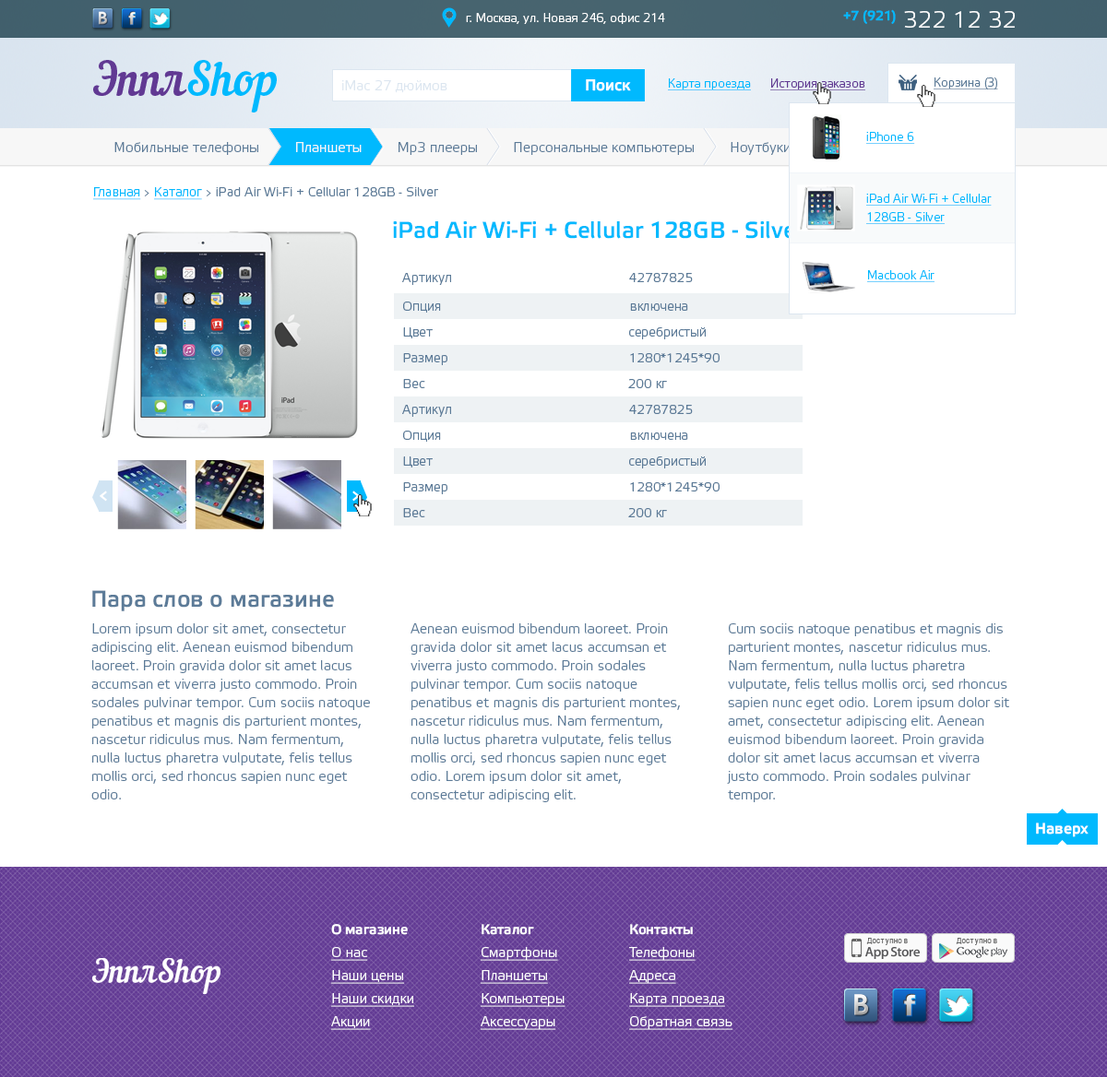
<style>
.page{position:relative;width:1107px;height:1077px;background:#ffffff}
.page>*{position:absolute;margin:0}
.t1{font:12px "ElektraLightPro";color:#ffffff}
.t2{font:23.1px "ElektraLightPro";color:#ffffff}
.t3{font:23.1px "ElektraLightPro-Bold";color:#00b9fe}
.t4{font:12px "ElektraLightPro";color:#5c7b98;text-decoration:underline}
.t5{font:13.8px "ElektraLightPro";color:#dce6f0}
.t6{font:15.7px "ElektraLightPro-Bold";color:#ffffff}
.t7{font:12px "ElektraLightPro";color:#00b9fe;text-decoration:underline}
.t8{font:12px "ElektraLightPro";color:#613993;text-decoration:underline}
.t9{font:13.8px "ElektraLightPro";color:#5c7b98}
.t10{font:13.8px "ElektraLightPro";color:#f7f7f7}
.t11{font:12.9px "ElektraLightPro";color:#5c7b98}
.t12{font:12.9px "ElektraLightPro";color:#00b9fe;text-decoration:underline}
.t13{font:9.2px "ElektraLightPro";color:#5c7b98}
.t14{font:12px/18.4px "ElektraLightPro";color:#00b9fe;text-decoration:underline}
.t15{font:12.9px/25.8px "ElektraLightPro";color:#5c7b98}
.t16{font:12.9px/28.6px "ElektraLightPro";color:#5c7b98}
.t17{font:23.1px "ElektraLightPro-Bold";color:#5c7b98}
.t18{font:13.8px/18.4px "ElektraLightPro";color:#5c7b98}
.t19{font:25.8px "ElektraLightPro-Bold";color:#ffffff}
.t20{font:13.8px/23.1px "ElektraLightPro";color:#ffffff;text-decoration:underline}
.t21{font:13.8px/23.1px "ElektraLightPro-Bold";color:#ffffff}
</style>
<div class="page">
<p class="t1" style="left:466px;top:13px;width:199px;height:11px">г. Москва, ул. Новая 246, офис 214</p>
<p class="t2" style="left:843px;top:9px;width:172px;height:19px"><span class="t3">+7 (921) </span>322 12 32</p>
<p class="t4" style="left:933px;top:77px;width:65px;height:12px">Корзина (3)</p>
<p class="t5" style="left:342px;top:80px;width:105px;height:13px">iMac 27 дюймов</p>
<p class="t6" style="left:586px;top:79px;width:45px;height:12px">Поиск</p>
<p class="t7" style="left:668px;top:78px;width:83px;height:12px">Карта проезда</p>
<p class="t8" style="left:770px;top:78px;width:95px;height:12px">История заказов</p>
<p class="t7" style="left:866px;top:132px;width:49px;height:12px">iPhone 6</p>
<p class="t9" style="left:114px;top:142px;width:878px;height:13px">Мобильные телефоны         <span class="t10">Планшеты         </span>Мр3 плееры         Персональные компьютеры         Ноутбуки         Apple TV         Аксессуары</p>
<p class="t11" style="left:93px;top:187px;width:345px;height:13px"><span class="t12">Главная </span><span class="t13">&gt; </span><span class="t12">Каталог </span><span class="t13">&gt; </span>iPad Air Wi-Fi + Cellular 128GB - Silver</p>
<p class="t14" style="left:866px;top:194px;width:126px;height:30px">iPad Air Wi-Fi + Cellular<br>128GB - Silver</p>
<p class="t3" style="left:393px;top:220px;width:412px;height:19px">iPad Air Wi-Fi + Cellular 128GB - Silver</p>
<p class="t15" style="left:402px;top:273px;width:317px;height:244px">Артикул                                                42787825<br><span class="t16">Опция                                                   включена<br></span>Цвет                                                     серебристый<br>Размер                                                 1280*1245*90<br>Вес                                                       200 кг<br>Артикул                                                42787825<br>Опция                                                   включена<br>Цвет                                                     серебристый<br>Размер                                                 1280*1245*90<br>Вес                                                       200 кг</p>
<p class="t7" style="left:867px;top:270px;width:67px;height:12px">Macbook Air</p>
<p class="t17" style="left:92px;top:590px;width:242px;height:22px">Пара слов о магазине</p>
<p class="t18" style="left:91px;top:624px;width:279px;height:176px">Lorem ipsum dolor sit amet, consectetur adipiscing elit. Aenean euismod bibendum laoreet. Proin gravida dolor sit amet lacus accumsan et viverra justo commodo. Proin sodales pulvinar tempor. Cum sociis natoque penatibus et magnis dis parturient montes, nascetur ridiculus mus. Nam fermentum, nulla luctus pharetra vulputate, felis tellus mollis orci, sed rhoncus sapien nunc eget odio.</p>
<p class="t18" style="left:410px;top:624px;width:270px;height:178px">Aenean euismod bibendum laoreet. Proin gravida dolor sit amet lacus accumsan et viverra justo commodo. Proin sodales pulvinar tempor. Cum sociis natoque penatibus et magnis dis parturient montes, nascetur ridiculus mus. Nam fermentum, nulla luctus pharetra vulputate, felis tellus mollis orci, sed rhoncus sapien nunc eget odio. Lorem ipsum dolor sit amet, consectetur adipiscing elit.</p>
<p class="t18" style="left:727px;top:624px;width:282px;height:178px">Cum sociis natoque penatibus et magnis dis parturient montes, nascetur ridiculus mus. Nam fermentum, nulla luctus pharetra vulputate, felis tellus mollis orci, sed rhoncus sapien nunc eget odio. Lorem ipsum dolor sit amet, consectetur adipiscing elit. Aenean euismod bibendum laoreet. Proin gravida dolor sit amet lacus accumsan et viverra justo commodo. Proin sodales pulvinar tempor.</p>
<p class="t19" style="left:1036px;top:823px;width:52px;height:15px">Наверх</p>
<p class="t20" style="left:331px;top:924px;width:83px;height:106px"><span class="t21">О магазине<br></span>О нас<br>Наши цены<br>Наши скидки<br>Акции</p>
<p class="t20" style="left:481px;top:924px;width:84px;height:106px"><span class="t21">Каталог<br></span>Смартфоны<br>Планшеты<br>Компьютеры<br>Аксессуары</p>
<p class="t20" style="left:629px;top:924px;width:103px;height:106px"><span class="t21">Контакты<br></span>Телефоны<br>Адреса<br>Карта проезда<br>Обратная связь</p>
</div>
